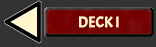
<style>
.page{position:relative;width:156px;height:47px;background:#333333}
.page>*{position:absolute;margin:0}
.t1{font:15.2px "Acme-Regular";color:#fff6cd}
</style>
<div class="page">
<p class="t1" style="left:79px;top:16px;width:40px;height:12px">DECK I</p>
</div>
